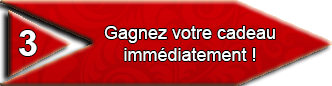
<style>
.page{position:relative;width:332px;height:86px}
.page>*{position:absolute;margin:0}
.t1{font:36px "Arial-BoldMT";color:#ffffff}
.t2{font:18px "ArialMT";color:#ffffff}
</style>
<div class="page">
<p class="t1" style="left:19px;top:30px;width:18px;height:26px">3</p>
<p class="t2" style="left:104px;top:26px;width:171px;height:35px;text-align:center">Gagnez votre cadeau<br>immédiatement !</p>
</div>
